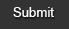
<style>
.page{position:relative;width:69px;height:29px;background:#333333}
.page>*{position:absolute;margin:0}
.t1{font:12.7px "ArialMT";color:#ffffff;scale:1.04 1}
</style>
<div class="page">
<p class="t1" style="left:13px;top:7px;width:41px;height:10px">Submit</p>
</div>
